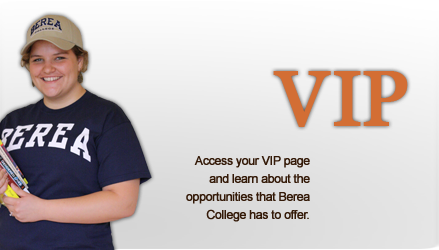
<style>
.page{position:relative;width:439px;height:250px}
.page>*{position:absolute;margin:0}
.t1{font:78px "Georgia";letter-spacing:0.02em;color:#d36e34;font-weight:bold}
.t2{font:78px "Georgia";letter-spacing:-0.04em;color:#d36e34;font-weight:bold}
.t3{font:78px "Georgia";letter-spacing:-0.06em;color:#d36e34;font-weight:bold}
.t4{font:12px/18px "ArialMT";letter-spacing:-0.04em;color:#341a08;font-weight:bold}
</style>
<div class="page">
<p class="t1" style="left:273px;top:71px;width:135px;height:56px">V<span class="t2">I</span><span class="t3">P</span></p>
<p class="t4" style="left:186px;top:156px;width:124px;height:66px;text-align:right">Access your VIP page<br> and learn about the opportunities that Berea College has to offer.</p>
</div>
